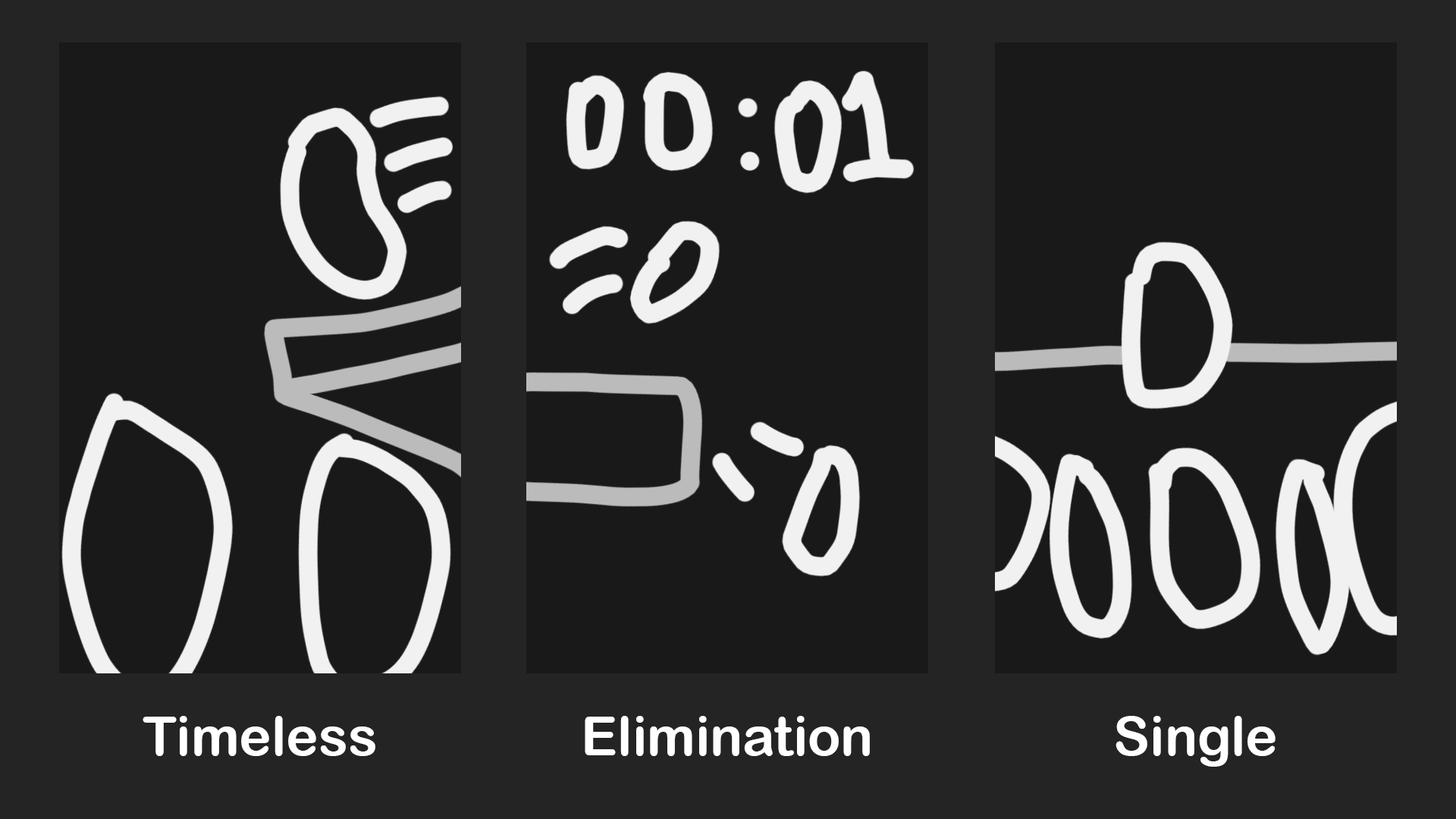
<style>
.page{position:relative;width:1456px;height:819px;background:#191919}
.page>*{position:absolute;margin:0}
.t1{font:54.4px "ArialRoundedMTBold";color:#ffffff}
</style>
<div class="page">
<p class="t1" style="left:143px;top:716px;width:232px;height:40px">Timeless</p>
<p class="t1" style="left:585px;top:716px;width:285px;height:40px">Elimination</p>
<p class="t1" style="left:1115px;top:716px;width:160px;height:51px">Single</p>
</div>
